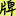
<style>
.page{position:relative;width:16px;height:16px;background:#e9f286}
.page>*{position:absolute;margin:0}
.t1{font:18px "DFHanziPenW5-A";color:#010000}
</style>
<div class="page">
<p class="t1" style="left:0px;top:0px;width:17px;height:18px">牌</p>
</div>
